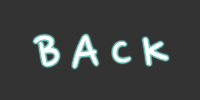
<style>
.page{position:relative;width:200px;height:100px;background:#333333}
.page>*{position:absolute;margin:0}
.t1{font:58.3px "NanumPen";letter-spacing:0.2em;color:#ffffff}
</style>
<div class="page">
<p class="t1" style="left:34px;top:35px;width:134px;height:33px">BACK</p>
</div>
